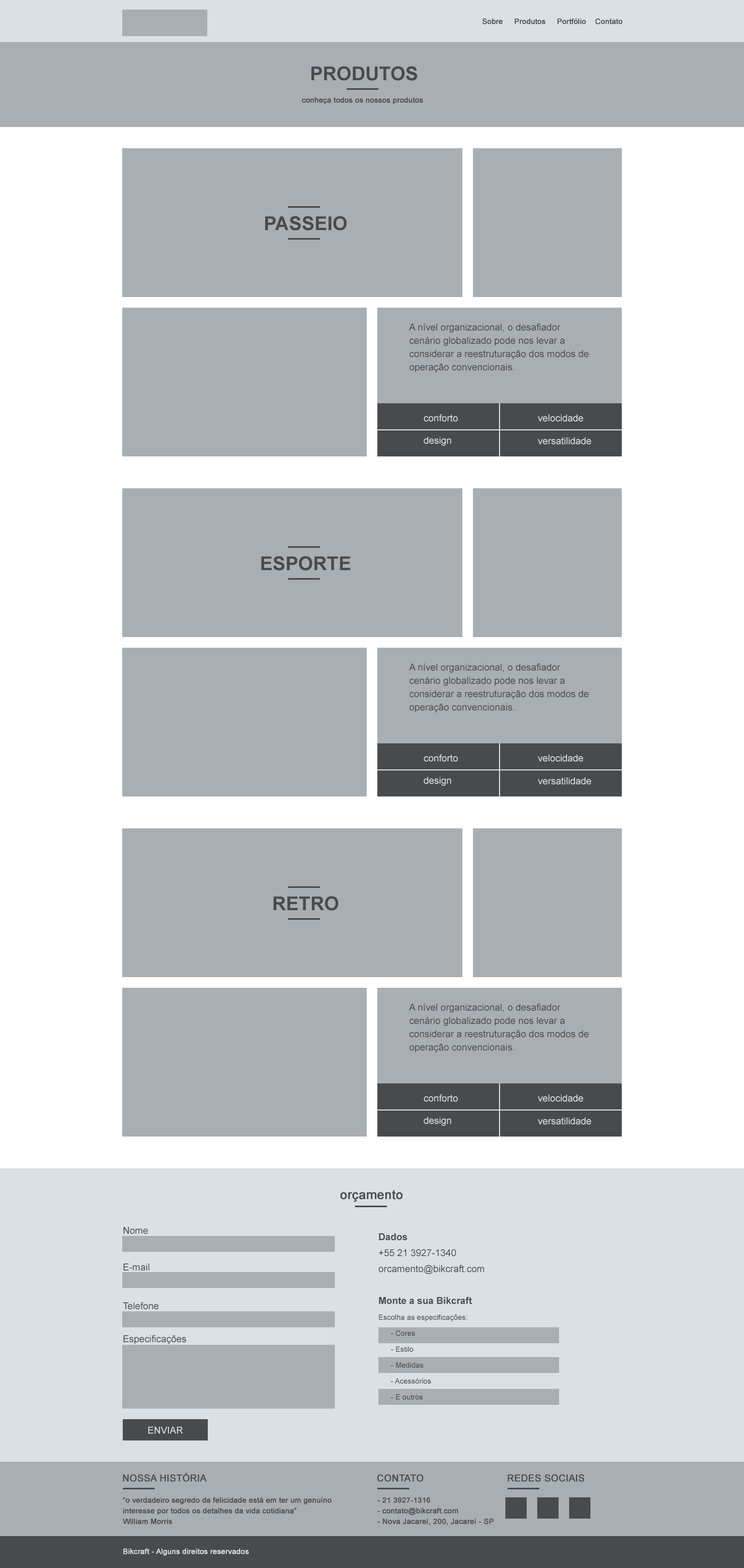
<style>
.page{position:relative;width:744px;height:1568px;background:#a9aeb3}
.page>*{position:absolute;margin:0}
.t1{font:7.4px "ArialMT";color:#484b4d;font-weight:bold}
.t2{font:19.1px "Arial-BoldMT";color:#484b4d;text-transform:uppercase}
.t3{font:9.6px/13.3px "ArialMT";color:#484b4d}
.t4{font:9.6px/13.3px "ArialMT";color:#a9aeb3}
.t5{font:9.6px "ArialMT";color:#d9e0e6}
.t6{font:12.6px "ArialMT";color:#484b4d;font-weight:bold}
.t7{font:9.6px "ArialMT";color:#484b4d}
.t8{font:7.4px/15.9px "ArialMT";color:#484b4d}
.t9{font:9.6px/15.9px "Arial-BoldMT";color:#484b4d}
.t10{font:9.6px/15.9px "ArialMT";color:#484b4d}
.t11{font:9.6px "ArialMT";color:#d9e0e6;text-transform:uppercase}
.t12{font:9.6px "ArialMT";color:#484b4d;text-transform:uppercase;font-weight:bold}
.t13{font:7.4px/10.6px "ArialMT";color:#484b4d;font-weight:bold}
.t14{font:7.4px "ArialMT";color:#d9e0e6;font-weight:bold}
</style>
<div class="page">
<p class="t1" style="left:482px;top:18px;width:140px;height:6px">Sobre     Produtos     Portfólio    Contato</p>
<p class="t2" style="left:311px;top:66px;width:106px;height:15px">produtos</p>
<p class="t1" style="left:302px;top:97px;width:121px;height:7px">conheça todos os nossos produtos</p>
<p class="t2" style="left:265px;top:216px;width:82px;height:15px">passeio</p>
<p class="t3" style="left:409px;top:323px;width:180px;height:49px">A nível organizacional, o desafiador cenário globalizado pode nos levar a considerar a reestruturação dos modos de operação convencionais.<br><span class="t4">uu</span></p>
<p class="t5" style="left:423px;top:414px;width:35px;height:8px">conforto</p>
<p class="t5" style="left:538px;top:414px;width:45px;height:8px">velocidade</p>
<p class="t5" style="left:423px;top:437px;width:28px;height:9px">design</p>
<p class="t5" style="left:538px;top:437px;width:53px;height:8px">versatilidade</p>
<p class="t2" style="left:261px;top:556px;width:90px;height:15px">esporte</p>
<p class="t3" style="left:409px;top:663px;width:180px;height:50px">A nível organizacional, o desafiador cenário globalizado pode nos levar a considerar a reestruturação dos modos de operação convencionais.<br><span class="t4">uu</span></p>
<p class="t5" style="left:423px;top:754px;width:35px;height:8px">conforto</p>
<p class="t5" style="left:538px;top:755px;width:45px;height:7px">velocidade</p>
<p class="t5" style="left:423px;top:777px;width:28px;height:9px">design</p>
<p class="t5" style="left:538px;top:777px;width:53px;height:8px">versatilidade</p>
<p class="t2" style="left:273px;top:896px;width:65px;height:15px">retro</p>
<p class="t3" style="left:409px;top:1003px;width:180px;height:50px">A nível organizacional, o desafiador cenário globalizado pode nos levar a considerar a reestruturação dos modos de operação convencionais.<br><span class="t4">uu</span></p>
<p class="t5" style="left:423px;top:1094px;width:35px;height:8px">conforto</p>
<p class="t5" style="left:538px;top:1095px;width:45px;height:7px">velocidade</p>
<p class="t5" style="left:423px;top:1117px;width:28px;height:9px">design</p>
<p class="t5" style="left:538px;top:1117px;width:53px;height:8px">versatilidade</p>
<p class="t6" style="left:340px;top:1190px;width:63px;height:12px">orçamento</p>
<p class="t7" style="left:123px;top:1227px;width:25px;height:7px">Nome</p>
<p class="t8" style="left:378px;top:1233px;width:106px;height:167px"><span class="t9">Dados<br></span><span class="t10">+55 21 3927-1340<br>orcamento@bikcraft.com<br><br></span><span class="t9">Monte a sua Bikcraft<br></span>Escolha as especificações:<br>      - Cores<br>      - Estilo<br>      - Medidas<br>      - Acessórios<br>      - E outros</p>
<p class="t7" style="left:123px;top:1264px;width:26px;height:7px">E-mail</p>
<p class="t7" style="left:123px;top:1302px;width:36px;height:8px">Telefone</p>
<p class="t7" style="left:123px;top:1335px;width:64px;height:9px">Especificações</p>
<p class="t11" style="left:148px;top:1427px;width:35px;height:7px">enviar</p>
<p class="t12" style="left:123px;top:1472px;width:84px;height:10px">Nossa história</p>
<p class="t12" style="left:377px;top:1474px;width:46px;height:8px">Contato</p>
<p class="t12" style="left:507px;top:1474px;width:77px;height:8px">Redes sociais</p>
<p class="t13" style="left:123px;top:1497px;width:209px;height:27px">“o verdadeiro segredo da felicidade está em ter um genuíno interesse por todos os detalhes da vida cotidiana”<br>William Morris</p>
<p class="t13" style="left:377px;top:1497px;width:117px;height:28px">- 21 3927-1316<br>- contato@bikcraft.com<br>- Nova Jacareí, 200, Jacareí - SP</p>
<p class="t14" style="left:123px;top:1548px;width:126px;height:8px">Bikcraft - Alguns direitos reservados</p>
</div>
